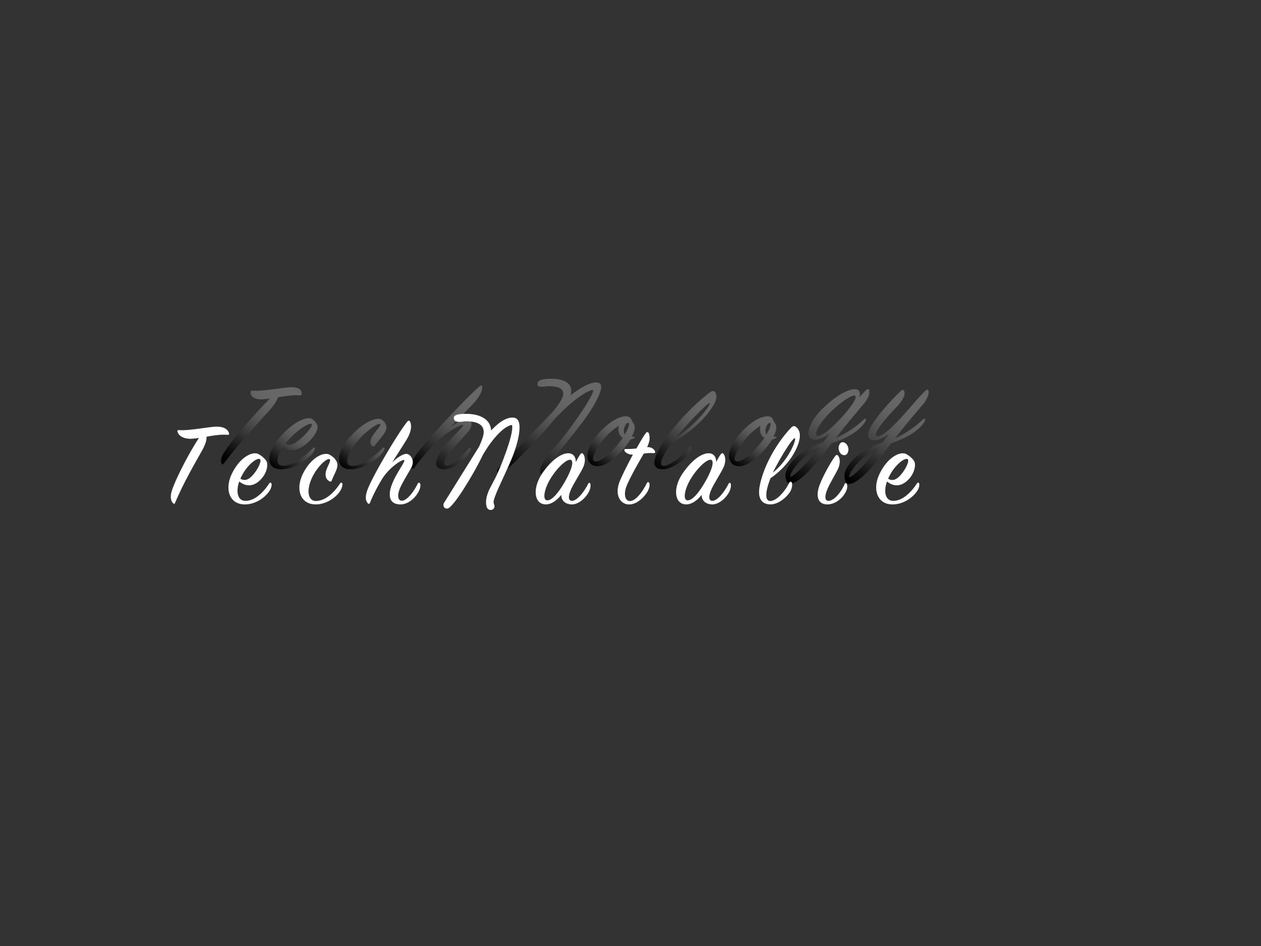
<style>
.page{position:relative;width:1261px;height:946px;background:#333333}
.page>*{position:absolute;margin:0}
.t1{font:123.1px "SignPainter-HouseScript";letter-spacing:0.26em;color:#ffffff}
.t2{font:88.7px "SignPainter-HouseScript";color:#363639}
.t3{font:123.1px "Rebecca";letter-spacing:0.26em;color:#ffffff}
</style>
<div class="page">
<p class="t1" style="left:171px;top:414px;width:749px;height:96px"><span class="t2"><br><br><br><br><br><br><br><br><br><br><br></span>Tech<span class="t3">N</span>atalie</p>
</div>
